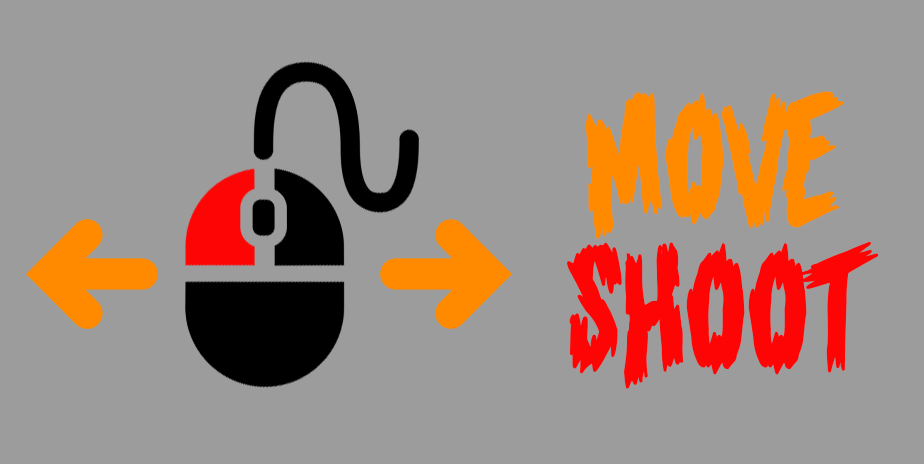
<style>
.page{position:relative;width:924px;height:464px;background:#9c9c9c}
.page>*{position:absolute;margin:0}
.t1{font:150px/150px "Infringement";color:#fe0505}
.t2{font:150px/150px "Infringement";color:#ff8a00}
</style>
<div class="page">
<p class="t1" style="left:567px;top:91px;width:312px;height:298px;text-align:center"><span class="t2">MOVE<br></span>SHOOT</p>
</div>
